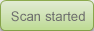
<style>
.page{position:relative;width:94px;height:31px}
.page>*{position:absolute;margin:0}
.t1{font:13.3px "ArialMT";color:#6e6e6e}
</style>
<div class="page">
<p class="t1" style="left:11px;top:11px;width:74px;height:11px">Scan started</p>
</div>
